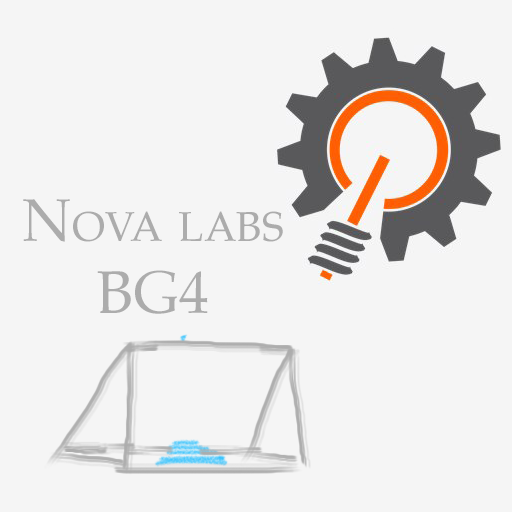
<style>
.page{position:relative;width:512px;height:512px;background:#f5f5f5}
.page>*{position:absolute;margin:0}
.t1{font:60px "Palatino-Roman";color:#acacac;font-variant:small-caps}
</style>
<div class="page">
<p class="t1" style="left:23px;top:199px;width:260px;height:115px;text-align:center">Nova labs<br>BG4</p>
</div>
